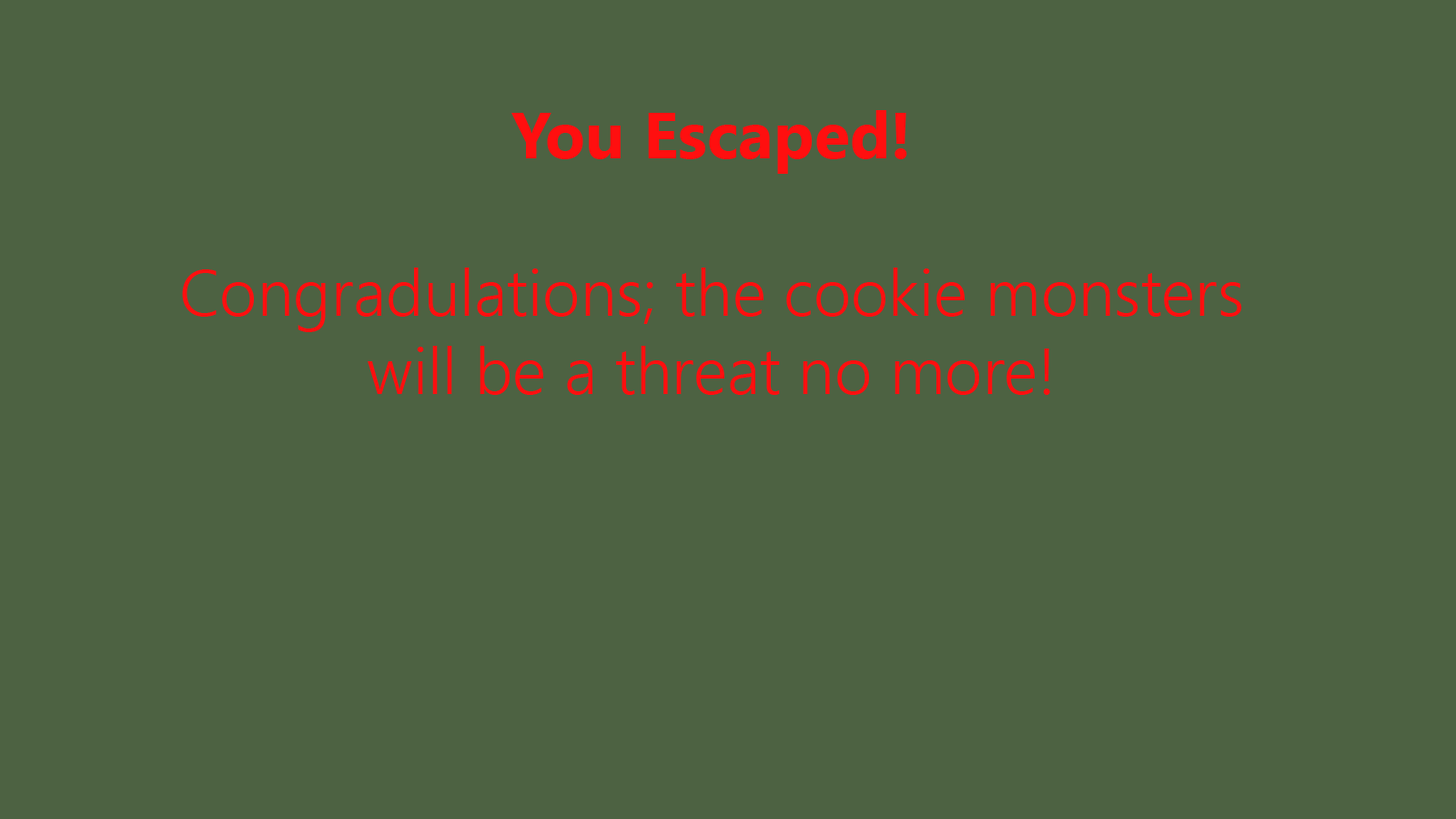
<style>
.page{position:relative;width:1456px;height:819px;background:#4d6242}
.page>*{position:absolute;margin:0}
.t1{font:65.5px "SegoeUI-Semilight";color:#ff0f0f}
.t2{font:65.5px "SegoeUI-Bold";color:#ff0f0f}
</style>
<div class="page">
<p class="t1" style="left:182px;top:110px;width:1060px;height:285px;text-align:center"><span class="t2">You Escaped!<br><br></span>Congradulations; the cookie monsters<br>will be a threat no more!</p>
</div>
